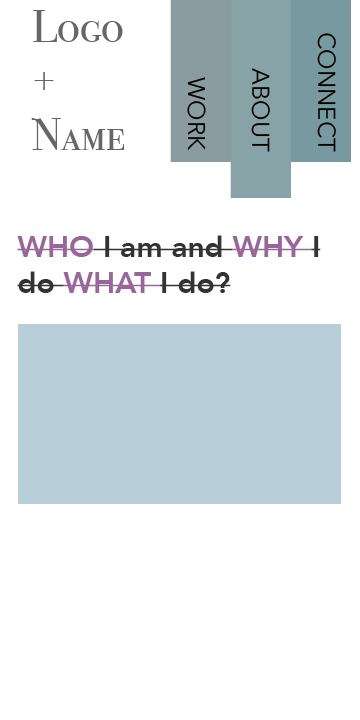
<style>
.page{position:relative;width:360px;height:720px;background:#ffffff}
.page>*{position:absolute;margin:0}
.t1{font:45px "BodoniSvtyTwoSCITCTTBook";color:#666666}
.t2{font:24px "AvenirNext-Regular";color:#000000}
.t3{font:30px "Avenir-Heavy";color:#333333}
.t4{font:30px "Avenir-Heavy";color:#996699}
</style>
<div class="page">
<p class="t1" style="left:31px;top:10px;width:94px;height:140px">Logo<br>+<br>Name</p>
<p class="t2" style="left:317px;top:33px;width:19px;height:119px;rotate:90deg">CONNECT</p>
<p class="t2" style="left:187px;top:77px;width:19px;height:73px;rotate:90deg">WORK</p>
<p class="t2" style="left:251px;top:68px;width:19px;height:84px;rotate:90deg">ABOUT</p>
<p class="t3" style="left:17px;top:235px;width:304px;height:58px"><span class="t4">WHO</span> I am and <span class="t4">WHY </span>I do <span class="t4">WHAT </span>I do?</p>
</div>
